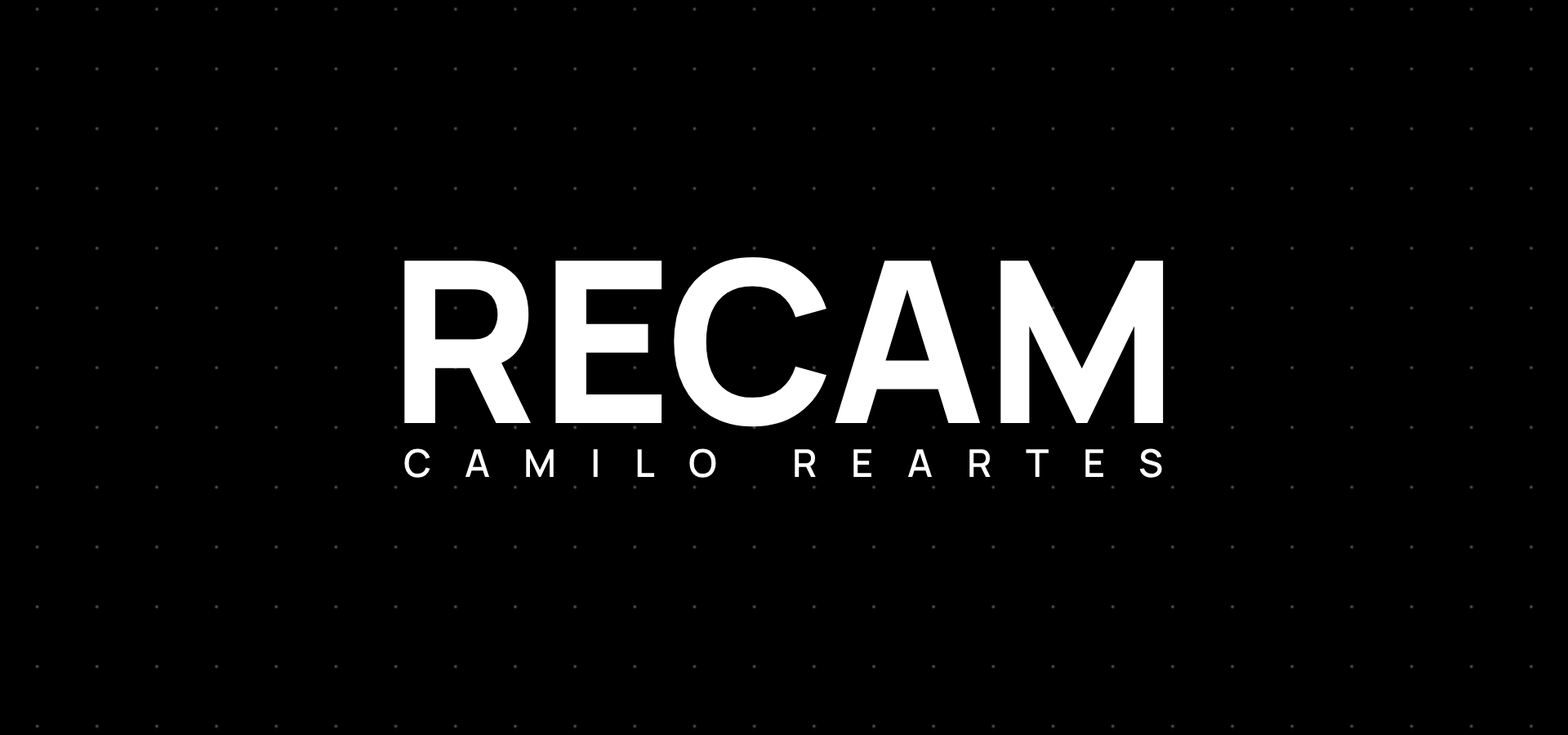
<style>
.page{position:relative;width:1568px;height:735px;background:#000000}
.page>*{position:absolute;margin:0}
.t1{font:225.5px "Manrope-ExtraBold";color:#ffffff}
.t2{font:38.4px "Manrope-SemiBold";letter-spacing:0.885em;color:#ffffff}
</style>
<div class="page">
<p class="t1" style="left:404px;top:257px;width:760px;height:170px">RECAM</p>
<p class="t2" style="left:404px;top:448px;width:758px;height:30px">CAMILO REARTES</p>
</div>
